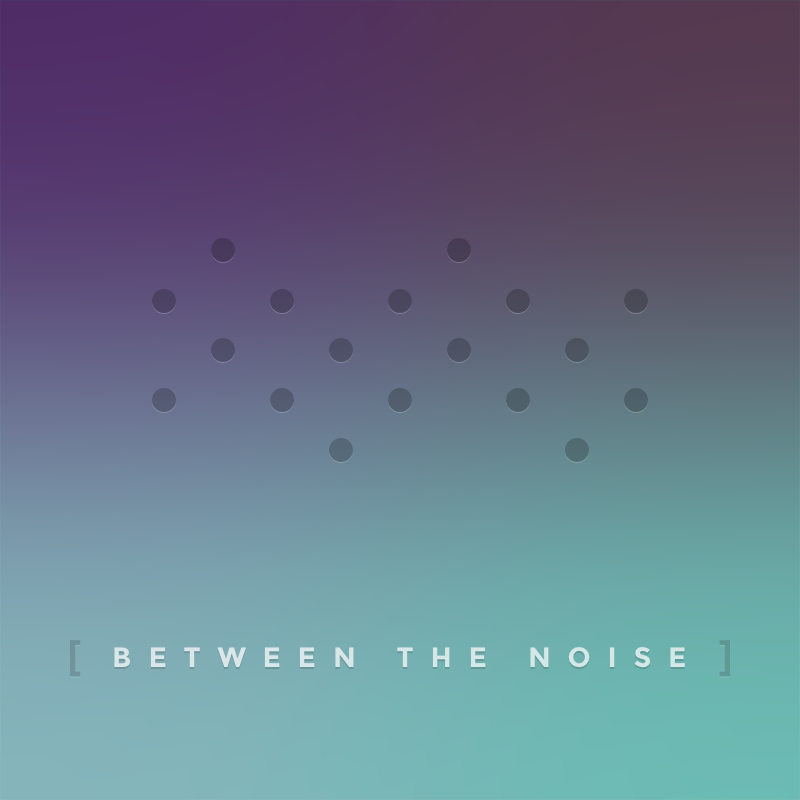
<style>
.page{position:relative;width:800px;height:800px}
.page>*{position:absolute;margin:0}
.t1{font:40.4px "Montserrat-Bold";letter-spacing:0.6em;color:#71949b;text-transform:uppercase}
.t2{font:40.4px "Montserrat-Bold";letter-spacing:0.6em;color:#5f9995;text-transform:uppercase}
.t3{font:28px "Montserrat-Bold";letter-spacing:0.6em;color:#d7e7e8;text-transform:uppercase}
</style>
<div class="page">
<p class="t1" style="left:70px;top:640px;width:11px;height:37px">[</p>
<p class="t2" style="left:719px;top:640px;width:11px;height:37px">]</p>
<p class="t3" style="left:114px;top:647px;width:571px;height:21px">Between the noisE</p>
</div>
